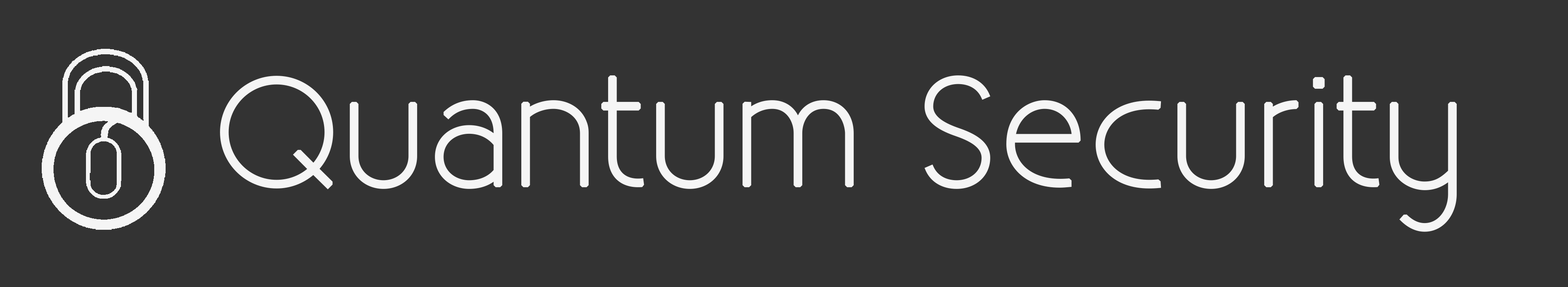
<style>
.page{position:relative;width:1568px;height:287px;background:#333333}
.page>*{position:absolute;margin:0}
.t1{font:151.7px "Existence-Light";color:#f5f5f5;font-weight:bold}
</style>
<div class="page">
<p class="t1" style="left:220px;top:75px;width:1237px;height:157px">Quantum Security</p>
</div>
